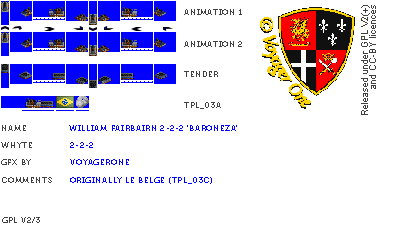
<style>
.page{position:relative;width:400px;height:230px;background:#ffffff}
.page>*{position:absolute;margin:0}
.t1{font:8px "Museo700-Regular";letter-spacing:0.075em;color:#404040;text-transform:uppercase}
.t2{font:8px "Museo700-Regular";letter-spacing:0.075em;color:#0000ff;text-transform:uppercase}
</style>
<div class="page">
<p class="t1" style="left:184px;top:9px;width:58px;height:6px">Animation 1</p>
<p class="t1" style="left:184px;top:41px;width:58px;height:6px">Animation 2</p>
<p class="t1" style="left:184px;top:71px;width:34px;height:6px">tender</p>
<p class="t1" style="left:184px;top:102px;width:37px;height:7px">tpl_03a</p>
<p class="t1" style="left:2px;top:125px;width:24px;height:6px">name</p>
<p class="t2" style="left:69px;top:125px;width:168px;height:6px">William Fairbairn 2-2-2 'Baroneza'</p>
<p class="t1" style="left:1px;top:142px;width:31px;height:6px">whyte</p>
<p class="t2" style="left:70px;top:142px;width:23px;height:6px">2-2-2</p>
<p class="t1" style="left:1px;top:159px;width:30px;height:6px">gfx by</p>
<p class="t2" style="left:70px;top:159px;width:59px;height:6px">voyagerone</p>
<p class="t1" style="left:2px;top:177px;width:50px;height:6px">comments</p>
<p class="t2" style="left:70px;top:177px;width:142px;height:7px">originally le belge (tpl_03c)</p>
<p class="t1" style="left:2px;top:217px;width:38px;height:6px">gpl v2/3</p>
</div>
